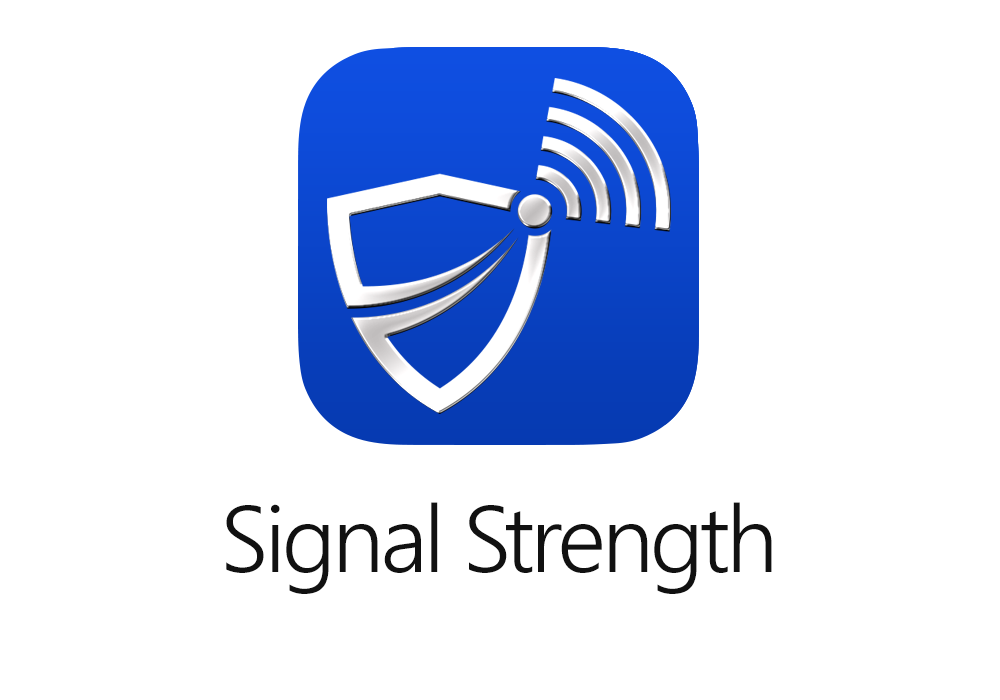
<style>
.page{position:relative;width:1000px;height:700px;background:#ffffff}
.page>*{position:absolute;margin:0}
.t1{font:94px "SegoeUI-Semilight";letter-spacing:-0.04em;color:#111111}
</style>
<div class="page">
<p class="t1" style="left:226px;top:502px;width:546px;height:92px">Signal Strength</p>
</div>
